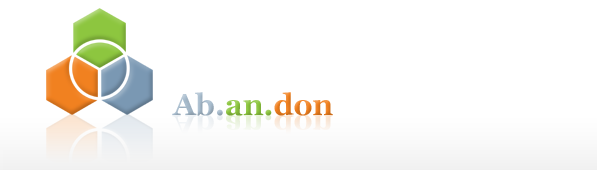
<style>
.page{position:relative;width:597px;height:170px;background:#ffffff}
.page>*{position:absolute;margin:0}
.t1{font:30px "Georgia-Bold";color:#a9bdce}
.t2{font:30px "Georgia-Bold";color:#8dc63f}
.t3{font:30px "Georgia-Bold";color:#f18120}
</style>
<div class="page">
<p class="t1" style="left:172px;top:92px;width:161px;height:24px">Ab.<span class="t2">an.</span><span class="t3">don</span></p>
</div>
